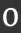
<style>
.page{position:relative;width:21px;height:33px;background:#333333}
.page>*{position:absolute;margin:0}
.t1{font:28.3px "Merriweather-Regular";color:#ffffff}
</style>
<div class="page">
<p class="t1" style="left:3px;top:8px;width:15px;height:19px">0</p>
</div>
